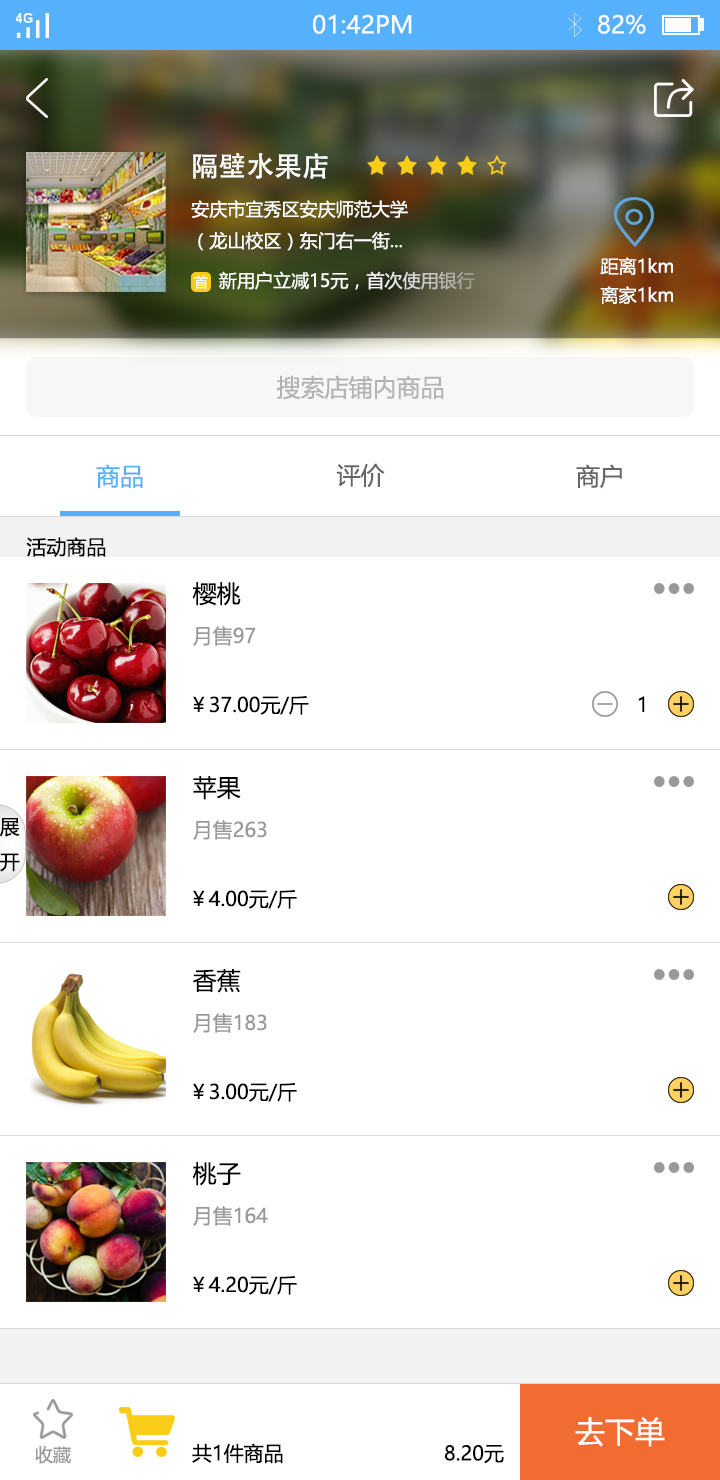
<style>
.page{position:relative;width:720px;height:1480px;background:#ffffff}
.page>*{position:absolute;margin:0}
.t1{font:24px "MicrosoftYaHei";color:#fbfdfc}
.t2{font:27.7px "AdobeHeitiStd-Regular";color:#ffffff}
.t3{font:18px "MicrosoftYaHei";color:#ffffff}
.t4{font:18.1px "MicrosoftYaHei";color:#ffffff}
.t5{font:13.8px "MicrosoftYaHei";color:#ffffff}
.t6{font:24px "MicrosoftYaHei";color:#b3b3b3}
.t7{font:24px "MicrosoftYaHei";color:#55b0fe}
.t8{font:24px "MicrosoftYaHei";color:#666666}
.t9{font:20px "MicrosoftYaHei";color:#010101}
.t10{font:24px "MicrosoftYaHei";color:#000000}
.t11{font:20px "MicrosoftYaHei";color:#999999}
.t12{font:20px "MicrosoftYaHei";color:#000000}
.t13{font:30px "MicrosoftYaHei";color:#ffffff}
.t14{font:17.9px "MicrosoftYaHei";color:#999999}
</style>
<div class="page">
<p class="t1" style="left:313px;top:14px;width:99px;height:20px">01:42PM</p>
<p class="t1" style="left:598px;top:14px;width:48px;height:20px">82%</p>
<p class="t2" style="left:193px;top:153px;width:135px;height:26px">隔壁水果店</p>
<p class="t3" style="left:191px;top:200px;width:217px;height:51px">安庆市宜秀区安庆师范大学<br>（龙山校区）东门右一街...</p>
<p class="t4" style="left:600px;top:257px;width:73px;height:18px">距离1km</p>
<p class="t5" style="left:194px;top:275px;width:14px;height:14px">首</p>
<p class="t3" style="left:219px;top:271px;width:256px;height:19px">新用户立减15元，首次使用银行</p>
<p class="t4" style="left:600px;top:286px;width:73px;height:18px">离家1km</p>
<p class="t6" style="left:277px;top:375px;width:167px;height:25px">搜索店铺内商品</p>
<p class="t7" style="left:96px;top:464px;width:47px;height:24px">商品</p>
<p class="t8" style="left:336px;top:463px;width:49px;height:25px">评价</p>
<p class="t8" style="left:576px;top:464px;width:46px;height:25px">商户</p>
<p class="t9" style="left:26px;top:537px;width:80px;height:20px">活动商品</p>
<p class="t10" style="left:192px;top:582px;width:49px;height:24px">樱桃</p>
<p class="t11" style="left:193px;top:626px;width:63px;height:20px">月售97</p>
<p class="t12" style="left:193px;top:696px;width:116px;height:19px">￥37.00元/斤</p>
<p class="t12" style="left:638px;top:696px;width:7px;height:16px">1</p>
<p class="t10" style="left:193px;top:776px;width:48px;height:24px">苹果</p>
<p class="t12" style="left:0px;top:818px;width:20px;height:54px">展<br>开</p>
<p class="t11" style="left:193px;top:820px;width:74px;height:20px">月售263</p>
<p class="t12" style="left:193px;top:890px;width:104px;height:19px">￥4.00元/斤</p>
<p class="t10" style="left:193px;top:969px;width:48px;height:24px">香蕉</p>
<p class="t11" style="left:193px;top:1013px;width:74px;height:20px">月售183</p>
<p class="t12" style="left:193px;top:1083px;width:104px;height:19px">￥3.00元/斤</p>
<p class="t10" style="left:192px;top:1162px;width:49px;height:24px">桃子</p>
<p class="t11" style="left:193px;top:1206px;width:75px;height:20px">月售164</p>
<p class="t12" style="left:193px;top:1276px;width:104px;height:19px">￥4.20元/斤</p>
<p class="t13" style="left:575px;top:1417px;width:90px;height:30px">去下单</p>
<p class="t14" style="left:35px;top:1446px;width:36px;height:18px">收藏</p>
<p class="t12" style="left:192px;top:1443px;width:91px;height:21px">共1件商品</p>
<p class="t12" style="left:444px;top:1445px;width:60px;height:19px">8.20元</p>
</div>
